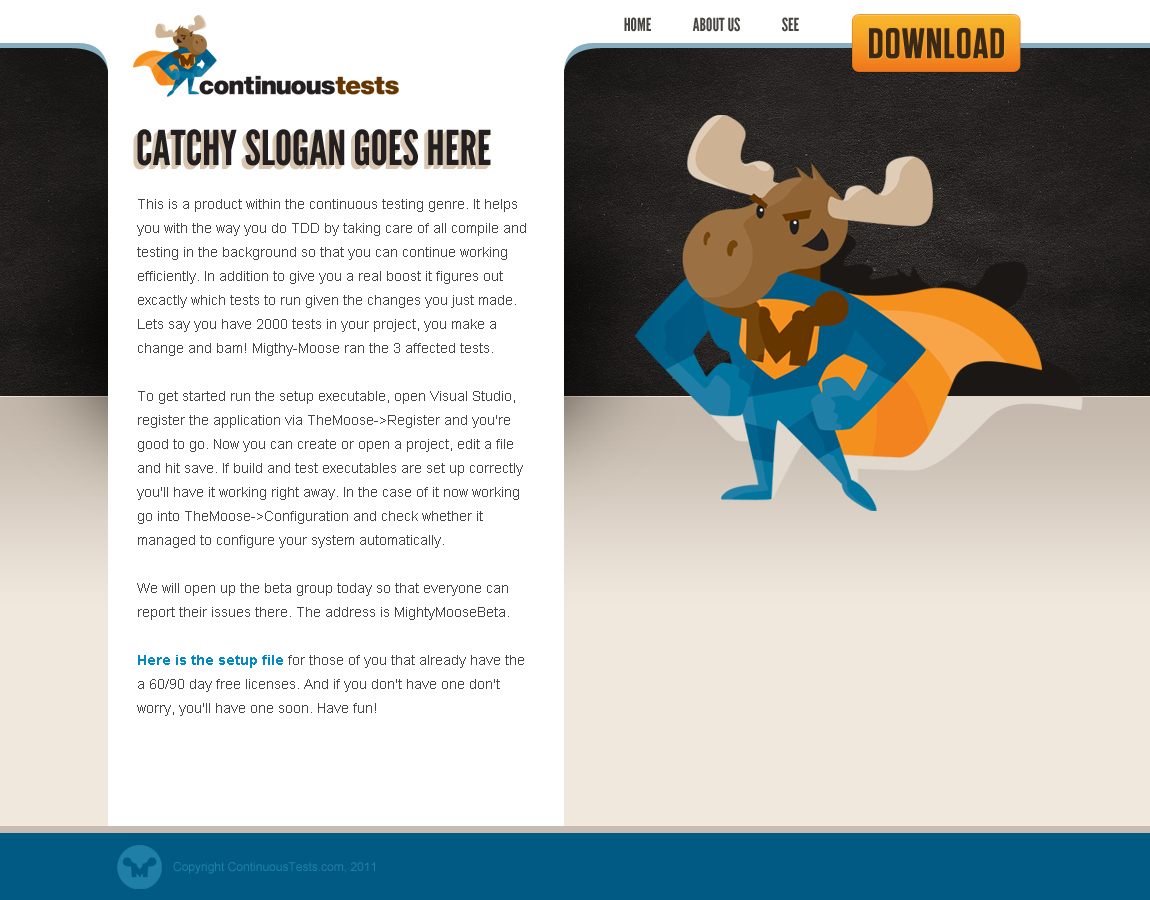
<style>
.page{position:relative;width:1150px;height:900px;background:#ffffff}
.page>*{position:absolute;margin:0}
.t1{font:18px "LeagueGothic";color:#47433e;text-transform:uppercase}
.t2{font:42px "Tungsten-Semibold";color:#3a2916;text-transform:uppercase;font-weight:bold}
.t3{font:48px "LeagueGothic";color:#231f20}
.t4{font:14px/24px "ArialMT";color:#444444}
.t5{font:14px/24px "Arial-BoldMT";color:#0288c3}
.t6{font:12px "ArialMT";color:#207fa6}
</style>
<div class="page">
<p class="t1" style="left:624px;top:17px;width:175px;height:15px">Home               About Us               See</p>
<p class="t2" style="left:869px;top:28px;width:135px;height:31px">Download</p>
<p class="t3" style="left:137px;top:129px;width:354px;height:37px">CATCHY SLOGAN GOES HERE</p>
<p class="t4" style="left:137px;top:199px;width:389px;height:517px">This is a product within the continuous testing genre. It helps you with the way you do TDD by taking care of all compile and testing in the background so that you can continue working efficiently. In addition to give you a real boost it figures out excactly which tests to run given the changes you just made. Lets say you have 2000 tests in your project, you make a change and bam! Migthy-Moose ran the 3 affected tests.<br><br>To get started run the setup executable, open Visual Studio, register the application via TheMoose-&gt;Register and you're good to go. Now you can create or open a project, edit a file and hit save. If build and test executables are set up correctly you'll have it working right away. In the case of it now working go into TheMoose-&gt;Configuration and check whether it managed to configure your system automatically.<br><br>We will open up the beta group today so that everyone can report their issues there. The address is MightyMooseBeta.<br><br><span class="t5">Here is the setup file</span> for those of you that already have the a 60/90 day free licenses. And if you don't have one don't worry, you'll have one soon. Have fun!</p>
<p class="t6" style="left:173px;top:862px;width:202px;height:12px">Copyright ContinuousTests.com, 2011</p>
</div>
